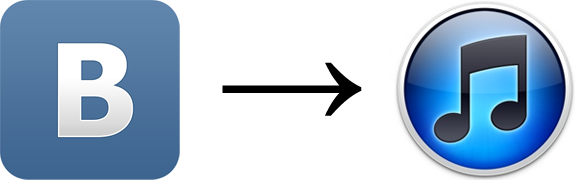
<style>
.page{position:relative;width:581px;height:180px;background:#ffffff}
.page>*{position:absolute;margin:0}
.t1{font:150px "Arial-BoldMT";color:#000000}
</style>
<div class="page">
<p class="t1" style="left:222px;top:62px;width:140px;height:54px">→</p>
</div>
